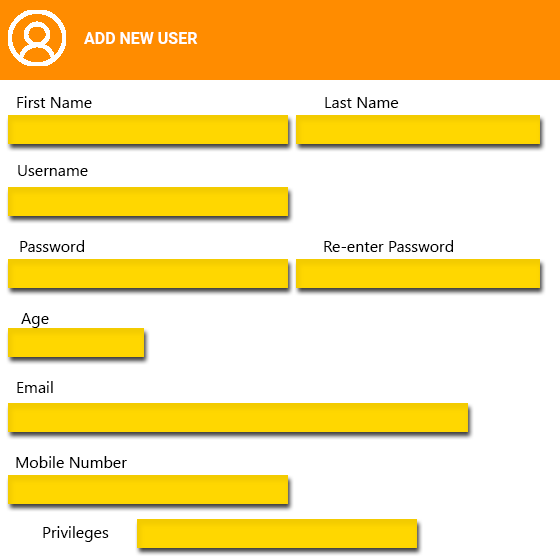
<style>
.page{position:relative;width:560px;height:560px;background:#ffffff}
.page>*{position:absolute;margin:0}
.t1{font:16px "Roboto-Bold";color:#ffffff}
.t2{font:16px "SegoeUI";color:#000000}
</style>
<div class="page">
<p class="t1" style="left:84px;top:32px;width:114px;height:12px">ADD NEW USER</p>
<p class="t2" style="left:17px;top:96px;width:75px;height:12px">First Name</p>
<p class="t2" style="left:325px;top:97px;width:74px;height:11px">Last Name</p>
<p class="t2" style="left:18px;top:165px;width:70px;height:11px">Username</p>
<p class="t2" style="left:20px;top:240px;width:64px;height:12px">Password</p>
<p class="t2" style="left:324px;top:240px;width:129px;height:12px">Re-enter Password</p>
<p class="t2" style="left:21px;top:313px;width:28px;height:15px">Age</p>
<p class="t2" style="left:17px;top:381px;width:36px;height:12px">Email</p>
<p class="t2" style="left:16px;top:456px;width:111px;height:12px">Mobile Number</p>
<p class="t2" style="left:43px;top:526px;width:66px;height:16px">Privileges</p>
</div>
